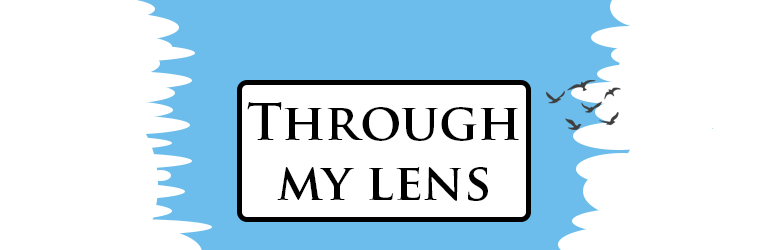
<style>
.page{position:relative;width:768px;height:250px;background:#ffffff}
.page>*{position:absolute;margin:0}
.t1{font:50px "TrajanPro-Bold";color:#000000}
</style>
<div class="page">
<p class="t1" style="left:247px;top:102px;width:272px;height:99px;text-align:center">Through my lens</p>
</div>
